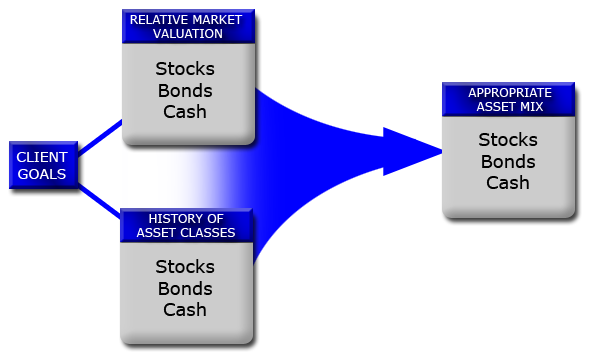
<style>
.page{position:relative;width:592px;height:362px;background:#ffffff}
.page>*{position:absolute;margin:0}
.t1{font:12px "Verdana";color:#ffffff}
.t2{font:18px "Verdana";color:#000000}
.t3{font:14px "Verdana";color:#ffffff}
</style>
<div class="page">
<p class="t1" style="left:130px;top:15px;width:113px;height:23px;text-align:center">RELATIVE MARKET <br>VALUATION</p>
<p class="t2" style="left:156px;top:61px;width:59px;height:57px;text-align:center">Stocks<br>Bonds<br>Cash</p>
<p class="t1" style="left:468px;top:88px;width:84px;height:23px;text-align:center">APPROPRIATE<br>ASSET MIX</p>
<p class="t2" style="left:479px;top:132px;width:59px;height:57px;text-align:center">Stocks<br>Bonds<br>Cash</p>
<p class="t3" style="left:16px;top:152px;width:52px;height:27px;text-align:center">CLIENT<br>GOALS</p>
<p class="t1" style="left:136px;top:214px;width:99px;height:23px;text-align:center">HISTORY OF<br>ASSET CLASSES</p>
<p class="t2" style="left:156px;top:259px;width:59px;height:57px;text-align:center">Stocks<br>Bonds<br>Cash</p>
</div>
